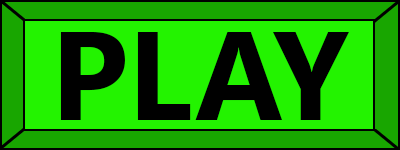
<style>
.page{position:relative;width:400px;height:150px;background:#23f300}
.page>*{position:absolute;margin:0}
.t1{font:125px "NirmalaUI-Bold";color:#000000}
</style>
<div class="page">
<p class="t1" style="left:60px;top:32px;width:289px;height:88px">PLAY</p>
</div>
